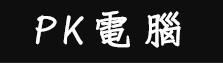
<style>
.page{position:relative;width:223px;height:63px;background:#0e0e0e}
.page>*{position:absolute;margin:0}
.t1{font:46.9px "DFYa-W3-WIN-BF";letter-spacing:0.08em;color:#ffffff;font-weight:bold;scale:0.97 1}
</style>
<div class="page">
<p class="t1" style="left:35px;top:10px;width:146px;height:38px">PK電腦</p>
</div>
